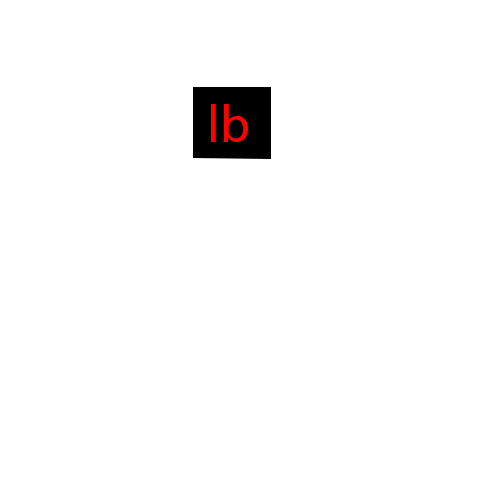
<style>
.page{position:relative;width:480px;height:480px;background:#ffffff}
.page>*{position:absolute;margin:0}
.t1{font:12px "MyriadPro-Regular";color:#ff0000}
</style>
<div class="page">
<p class="t1" style="left:211px;top:104px;width:37px;height:38px">lb</p>
</div>
